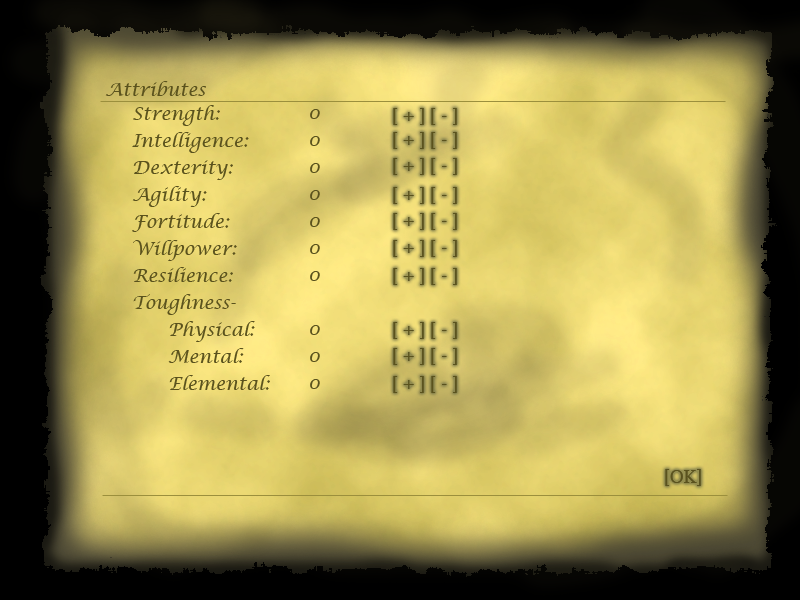
<style>
.page{position:relative;width:800px;height:600px}
.page>*{position:absolute;margin:0}
.t1{font:18px "LucidaCalligraphy-Italic";color:#5a521d}
.t2{font:18px/27px "LucidaCalligraphy-Italic";color:#5a521d}
.t3{font:18px "LucidaBright";color:#5a521d}
</style>
<div class="page">
<p class="t1" style="left:105px;top:81px;width:101px;height:15px">Attributes</p>
<p class="t2" style="left:132px;top:105px;width:138px;height:285px">Strength:<br>Intelligence:<br>Dexterity:<br>Agility:<br>Fortitude:<br>Willpower:<br>Resilience:<br>Toughness-<br> Physical:<br> Mental:<br> Elemental:</p>
<p class="t2" style="left:310px;top:109px;width:10px;height:280px">0<br>0<br>0<br>0<br>0<br>0<br>0<br><br>0<br>0<br>0</p>
<p class="t3" style="left:393px;top:108px;width:31px;height:17px">[ + ]</p>
<p class="t3" style="left:393px;top:108px;width:31px;height:17px">[ + ]</p>
<p class="t3" style="left:431px;top:108px;width:26px;height:17px">[ - ]</p>
<p class="t3" style="left:431px;top:108px;width:26px;height:17px">[ - ]</p>
<p class="t3" style="left:393px;top:132px;width:31px;height:17px">[ + ]</p>
<p class="t3" style="left:393px;top:132px;width:31px;height:17px">[ + ]</p>
<p class="t3" style="left:431px;top:132px;width:26px;height:17px">[ - ]</p>
<p class="t3" style="left:431px;top:132px;width:26px;height:17px">[ - ]</p>
<p class="t3" style="left:393px;top:158px;width:31px;height:17px">[ + ]</p>
<p class="t3" style="left:393px;top:158px;width:31px;height:17px">[ + ]</p>
<p class="t3" style="left:431px;top:158px;width:26px;height:17px">[ - ]</p>
<p class="t3" style="left:431px;top:158px;width:26px;height:17px">[ - ]</p>
<p class="t3" style="left:393px;top:187px;width:31px;height:17px">[ + ]</p>
<p class="t3" style="left:393px;top:187px;width:31px;height:17px">[ + ]</p>
<p class="t3" style="left:431px;top:187px;width:26px;height:17px">[ - ]</p>
<p class="t3" style="left:431px;top:187px;width:26px;height:17px">[ - ]</p>
<p class="t3" style="left:393px;top:213px;width:31px;height:17px">[ + ]</p>
<p class="t3" style="left:393px;top:213px;width:31px;height:17px">[ + ]</p>
<p class="t3" style="left:431px;top:213px;width:26px;height:17px">[ - ]</p>
<p class="t3" style="left:431px;top:213px;width:26px;height:17px">[ - ]</p>
<p class="t3" style="left:393px;top:240px;width:31px;height:17px">[ + ]</p>
<p class="t3" style="left:393px;top:240px;width:31px;height:17px">[ + ]</p>
<p class="t3" style="left:431px;top:240px;width:26px;height:17px">[ - ]</p>
<p class="t3" style="left:431px;top:240px;width:26px;height:17px">[ - ]</p>
<p class="t3" style="left:393px;top:268px;width:31px;height:17px">[ + ]</p>
<p class="t3" style="left:393px;top:268px;width:31px;height:17px">[ + ]</p>
<p class="t3" style="left:431px;top:268px;width:26px;height:17px">[ - ]</p>
<p class="t3" style="left:431px;top:268px;width:26px;height:17px">[ - ]</p>
<p class="t3" style="left:393px;top:322px;width:31px;height:17px">[ + ]</p>
<p class="t3" style="left:393px;top:322px;width:31px;height:17px">[ + ]</p>
<p class="t3" style="left:431px;top:322px;width:26px;height:17px">[ - ]</p>
<p class="t3" style="left:431px;top:322px;width:26px;height:17px">[ - ]</p>
<p class="t3" style="left:393px;top:348px;width:31px;height:17px">[ + ]</p>
<p class="t3" style="left:393px;top:348px;width:31px;height:17px">[ + ]</p>
<p class="t3" style="left:431px;top:348px;width:26px;height:17px">[ - ]</p>
<p class="t3" style="left:431px;top:348px;width:26px;height:17px">[ - ]</p>
<p class="t3" style="left:393px;top:376px;width:31px;height:17px">[ + ]</p>
<p class="t3" style="left:393px;top:376px;width:31px;height:17px">[ + ]</p>
<p class="t3" style="left:431px;top:376px;width:26px;height:17px">[ - ]</p>
<p class="t3" style="left:431px;top:376px;width:26px;height:17px">[ - ]</p>
<p class="t3" style="left:665px;top:469px;width:36px;height:17px">[OK]</p>
<p class="t3" style="left:665px;top:469px;width:36px;height:17px">[OK]</p>
</div>
